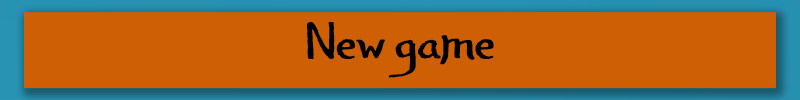
<style>
.page{position:relative;width:800px;height:100px;background:#cf5f05}
.page>*{position:absolute;margin:0}
.t1{font:41px "JandaAmazingGrace";color:#000000}
</style>
<div class="page">
<p class="t1" style="left:306px;top:21px;width:188px;height:57px">New game</p>
</div>
